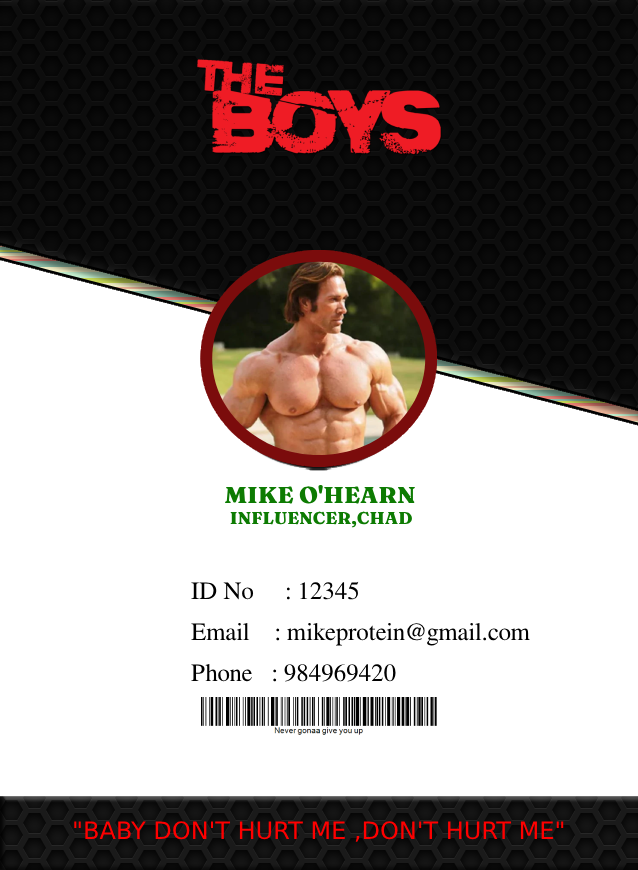
<style>
.page{position:relative;width:638px;height:870px;background:#ffffff}
.page>*{position:absolute;margin:0}
.t1{font:17px "Fraunces-Bold";color:#0d7b02;font-weight:bold}
.t2{font:18.7px "Fraunces-Bold";color:#6e6a1f}
.t3{font:23px "Fraunces-Bold";color:#0d7b02;font-weight:bold}
.t4{font:25px "FreeSerif";color:#000000}
.t5{font:24px "DejaVuSans";color:#ff0000}
</style>
<div class="page">
<p class="t1" style="left:224px;top:484px;width:191px;height:44px"><span class="t2">   </span><span class="t3">MIKE O'HEARN<br>    </span>INFLUENCER,CHAD</p>
<p class="t4" style="left:191px;top:581px;width:339px;height:101px">ID No     : 12345<br>Email    : mikeprotein@gmail.com<br>Phone   : 984969420</p>
<p class="t5" style="left:74px;top:821px;width:490px;height:21px">"BABY DON'T HURT ME ,DON'T HURT ME"</p>
</div>
